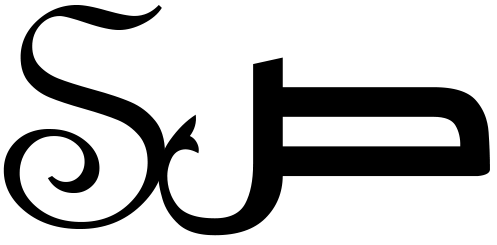
<style>
.page{position:relative;width:497px;height:245px;background:#ffffff}
.page>*{position:absolute;margin:0}
.t1{font:337px "FrenchScriptMT";color:#000000}
.t2{font:296px "ReemKufi-Regular";color:#000000}
</style>
<div class="page">
<p class="t1" style="left:3px;top:5px;width:162px;height:224px">S</p>
<p class="t2" style="left:158px;top:57px;width:332px;height:179px">ص</p>
</div>
